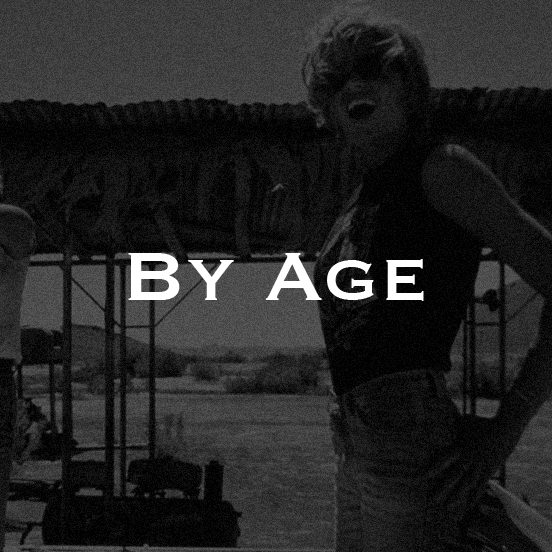
<style>
.page{position:relative;width:552px;height:552px}
.page>*{position:absolute;margin:0}
.t1{font:90px "Copperplate";color:#ffffff}
</style>
<div class="page">
<p class="t1" style="left:128px;top:253px;width:296px;height:48px">By Age</p>
</div>
